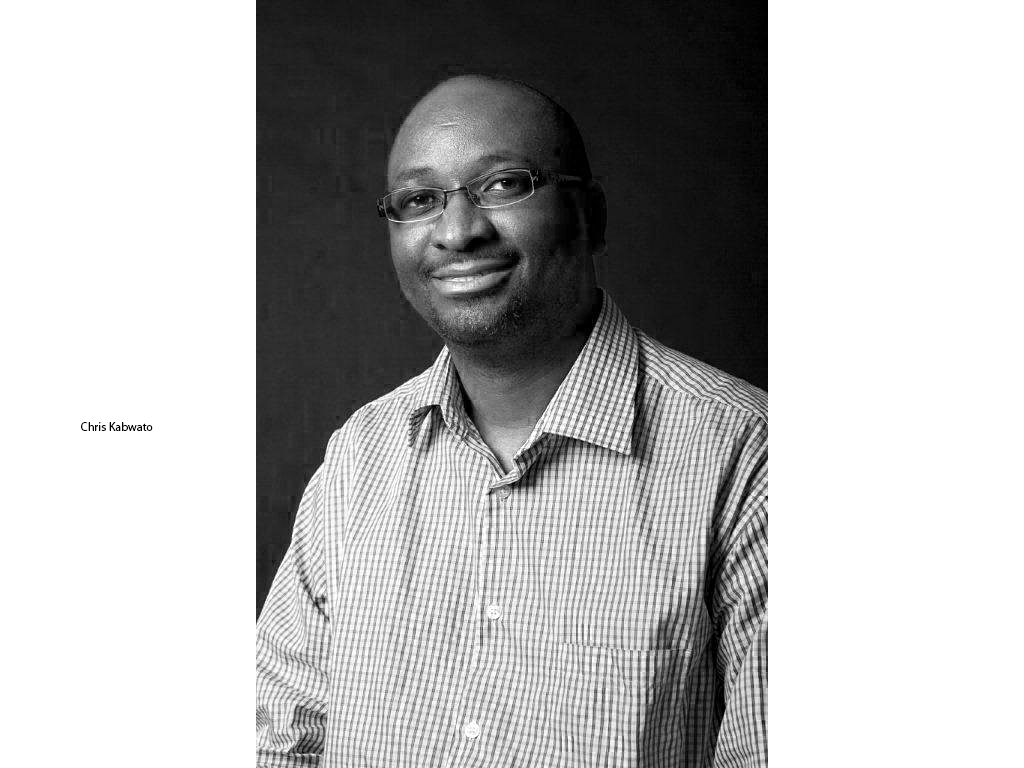
<style>
.page{position:relative;width:1024px;height:768px;background:#ffffff}
.page>*{position:absolute;margin:0}
.t1{font:12px "MyriadPro-Regular";color:#000000}
</style>
<div class="page">
<p class="t1" style="left:81px;top:422px;width:72px;height:9px">Chris Kabwato</p>
</div>
